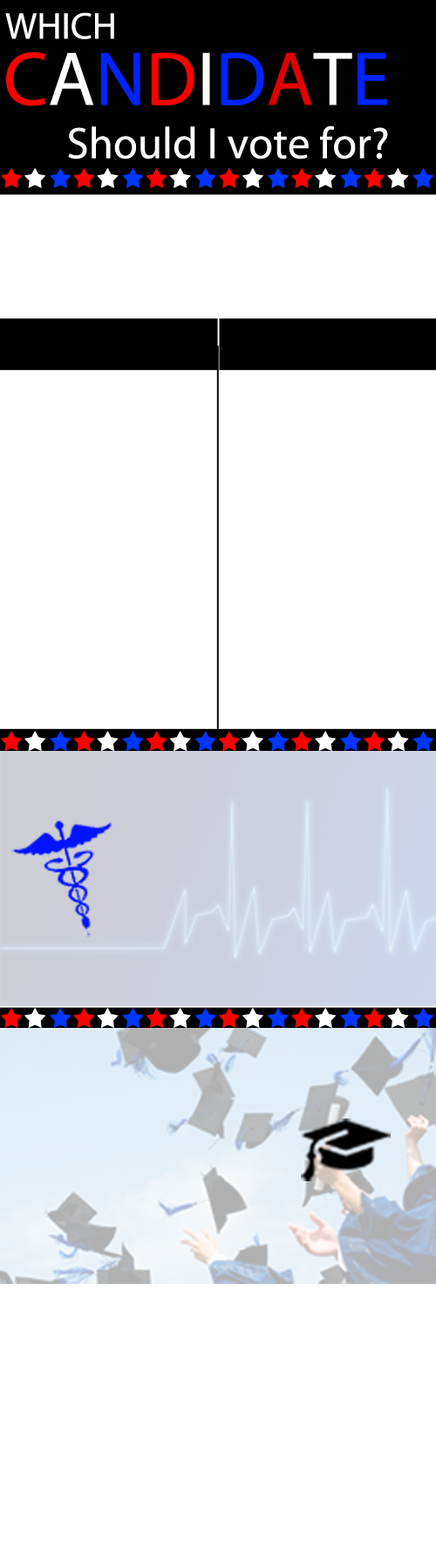
<style>
.page{position:relative;width:436px;height:1568px;background:#ffffff}
.page>*{position:absolute;margin:0}
.t1{font:37.6px "MyriadPro-Regular";color:#ffffff}
.t2{font:76.9px "MyriadPro-Regular";color:#ff0000}
.t3{font:76.9px "MyriadPro-Regular";color:#ffffff}
.t4{font:76.9px "MyriadPro-Regular";color:#0024ff}
.t5{font:76.9px "MyriadPro-Regular";color:#df0000}
.t6{font:44.4px "MyriadPro-Regular";color:#ffffff}
</style>
<div class="page">
<p class="t1" style="left:5px;top:12px;width:109px;height:27px">WHICH</p>
<p class="t2" style="left:6px;top:51px;width:381px;height:55px">C<span class="t3">A</span><span class="t4">N</span>D<span class="t3">I</span><span class="t4">D</span><span class="t5">A</span><span class="t3">T</span><span class="t4">E</span></p>
<p class="t6" style="left:68px;top:125px;width:320px;height:34px">Should I vote for?</p>
</div>
